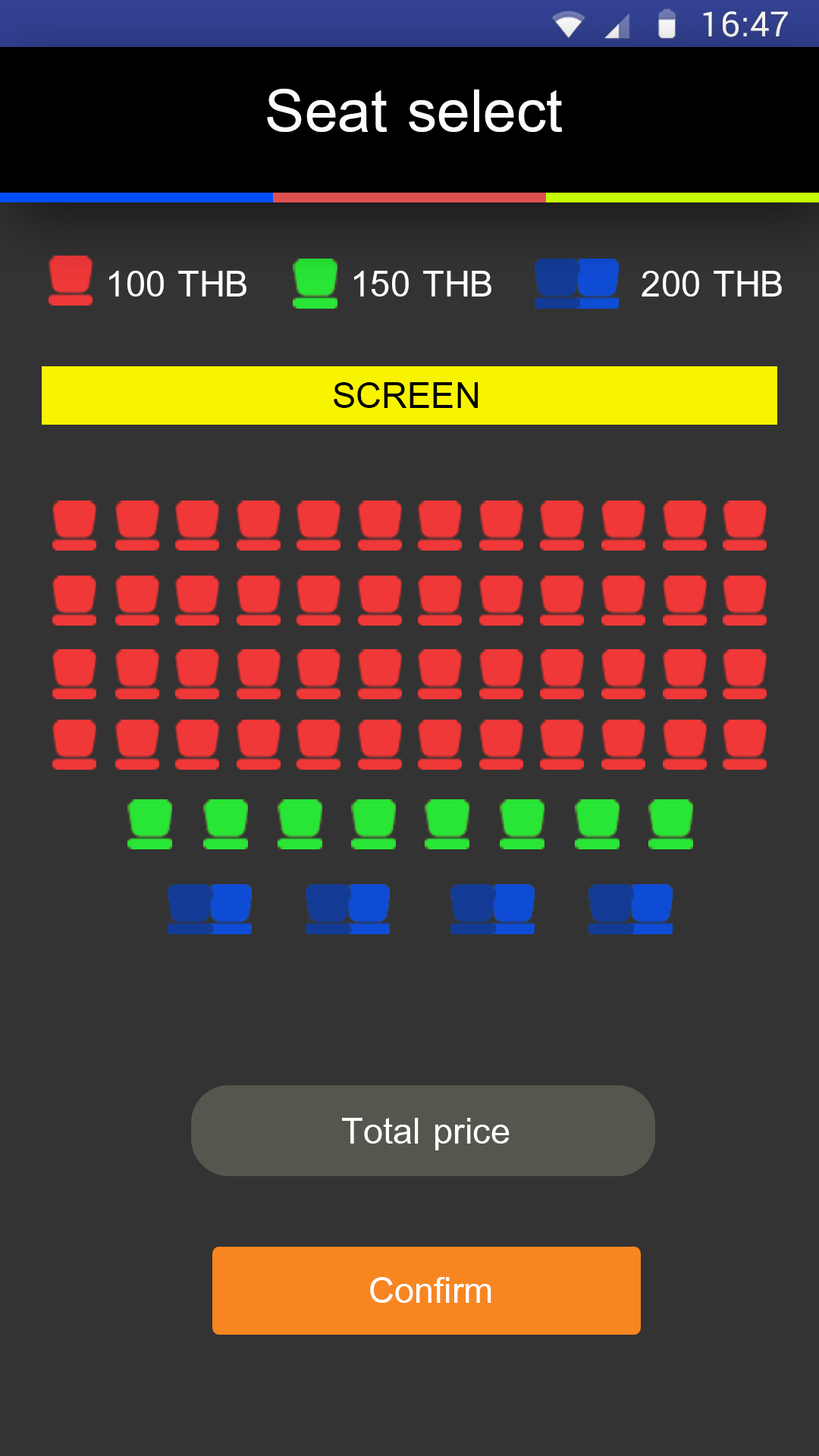
<style>
.page{position:relative;width:819px;height:1456px;background:#333333}
.page>*{position:absolute;margin:0}
.t1{font:91px "BrowalliaNew";color:#fefbfb}
.t2{font:54.6px "BrowalliaNew";color:#ffffff}
.t3{font:54.6px "BrowalliaNew";color:#010101}
</style>
<div class="page">
<p class="t1" style="left:267px;top:89px;width:296px;height:43px">Seat select</p>
<p class="t2" style="left:109px;top:271px;width:137px;height:26px">100 THB</p>
<p class="t2" style="left:354px;top:271px;width:137px;height:26px">150 THB</p>
<p class="t2" style="left:642px;top:271px;width:140px;height:26px">200 THB</p>
<p class="t3" style="left:334px;top:382px;width:145px;height:26px">SCREEN</p>
<p class="t2" style="left:342px;top:1118px;width:168px;height:32px">Total price</p>
<p class="t2" style="left:370px;top:1277px;width:121px;height:26px">Confirm</p>
</div>
